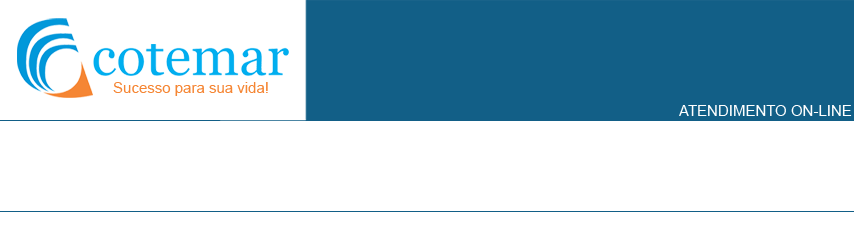
<style>
.page{position:relative;width:854px;height:244px;background:#ffffff}
.page>*{position:absolute;margin:0}
.t1{font:15px "ArialMT";color:#f58634}
.t2{font:15px "ArialMT";color:#ffffff}
</style>
<div class="page">
<p class="t1" style="left:113px;top:82px;width:155px;height:14px">Sucesso para sua vida!</p>
<p class="t2" style="left:679px;top:105px;width:173px;height:11px">ATENDIMENTO ON-LINE</p>
</div>
